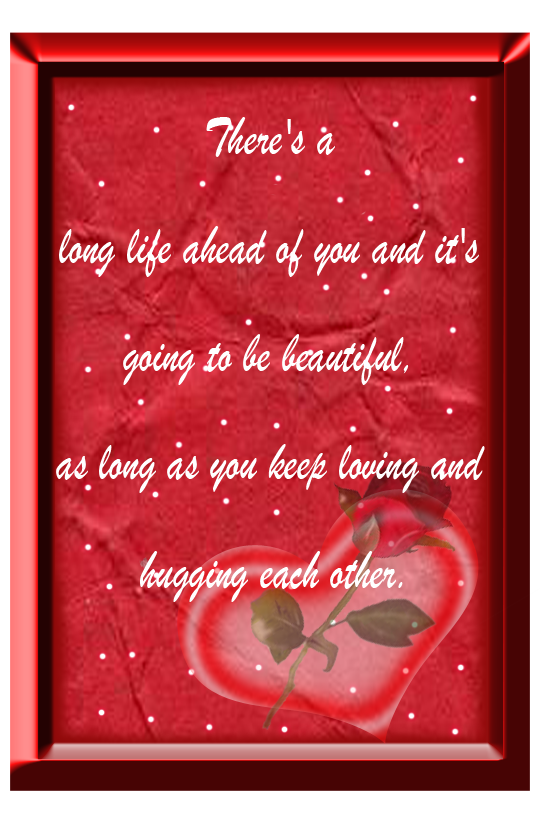
<style>
.page{position:relative;width:540px;height:820px}
.page>*{position:absolute;margin:0}
.t1{font:56.9px/108.4px "BrushScriptMT";color:#ffffff;scale:0.76 1}
</style>
<div class="page">
<p class="t1" style="left:56px;top:117px;width:429px;height:485px;text-align:center">There's a <br>long life ahead of you and it's <br>going to be beautiful, <br>as long as you keep loving and <br>hugging each other.</p>
</div>
